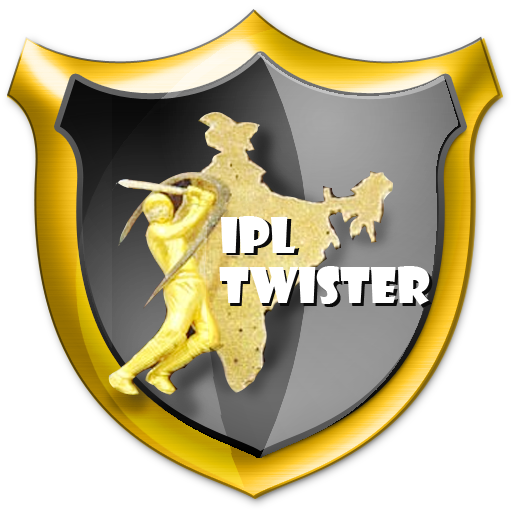
<style>
.page{position:relative;width:512px;height:512px;background:#ffffff}
.page>*{position:absolute;margin:0}
.t1{font:48px "ShowcardGothic-Reg";color:#ffffff}
</style>
<div class="page">
<p class="t1" style="left:221px;top:216px;width:75px;height:37px">IPL</p>
<p class="t1" style="left:219px;top:266px;width:211px;height:39px">TWISTER</p>
</div>
